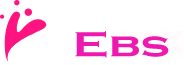
<style>
.page{position:relative;width:184px;height:65px;background:#ffffff}
.page>*{position:absolute;margin:0}
.t1{font:36px "CopperplateGothic-Bold";color:#ee19af;scale:1.32 1}
</style>
<div class="page">
<p class="t1" style="left:75px;top:31px;width:94px;height:27px">Ebs</p>
</div>
